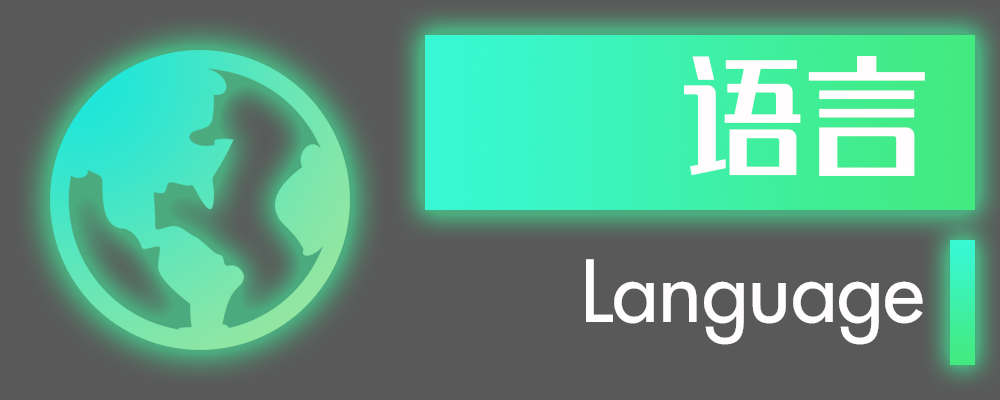
<style>
.page{position:relative;width:1000px;height:400px;background:#595959}
.page>*{position:absolute;margin:0}
.t1{font:125px "REEJIZhenyanGB20GX-Medium";color:#fffdfd}
.t2{font:83.3px "Futura-Medium";color:#fffdfd}
</style>
<div class="page">
<p class="t1" style="left:684px;top:56px;width:241px;height:120px">语言</p>
<p class="t2" style="left:586px;top:259px;width:337px;height:86px">Language</p>
</div>
